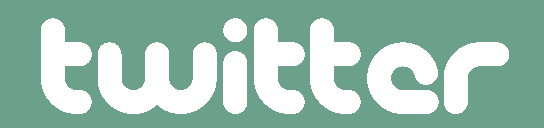
<style>
.page{position:relative;width:544px;height:128px;background:#6ba18a}
.page>*{position:absolute;margin:0}
.t1{font:141px "PicoBlackAl";color:#ffffff}
</style>
<div class="page">
<p class="t1" style="left:41px;top:18px;width:468px;height:96px">twitter</p>
</div>
